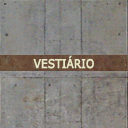
<style>
.page{position:relative;width:128px;height:128px}
.page>*{position:absolute;margin:0}
.t1{font:12.1px "Verdana";color:#e7e7c6;font-weight:bold;scale:0.86 1}
</style>
<div class="page">
<p class="t1" style="left:33px;top:55px;width:61px;height:14px">VESTIÁRIO</p>
</div>
